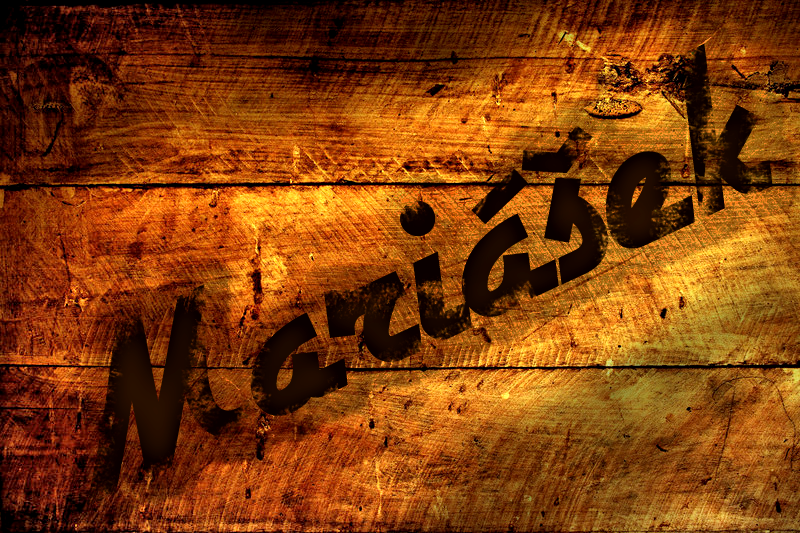
<style>
.page{position:relative;width:800px;height:533px}
.page>*{position:absolute;margin:0}
.t1{font:256px "Airstream";color:#1a0600}
</style>
<div class="page">
<p class="t1" style="left:86px;top:43px;width:687px;height:464px;rotate:-25deg">Mariášek</p>
</div>
